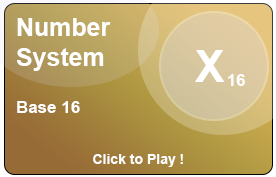
<style>
.page{position:relative;width:276px;height:177px}
.page>*{position:absolute;margin:0}
.t1{font:25px "Arial-BoldMT";color:#ffffff}
.t2{font:44px "Arial-BoldMT";color:#ffffff}
.t3{font:16.5px "Arial-BoldMT";color:#ffffff}
.t4{font:17px "Arial-BoldMT";color:#ffffff}
.t5{font:14px "Arial-BoldMT";color:#ffffff}
</style>
<div class="page">
<p class="t1" style="left:16px;top:18px;width:95px;height:53px">Number<br>System</p>
<p class="t2" style="left:195px;top:50px;width:30px;height:32px">X</p>
<p class="t3" style="left:228px;top:74px;width:17px;height:12px">16</p>
<p class="t4" style="left:17px;top:101px;width:63px;height:12px">Base 16</p>
<p class="t5" style="left:93px;top:154px;width:90px;height:13px">Click to Play !</p>
</div>
